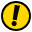
<style>
.page{position:relative;width:32px;height:32px;background:#ffd800}
.page>*{position:absolute;margin:0}
.t1{font:26px "HGPSoeiKakupoptai";color:#0a0a0a}
</style>
<div class="page">
<p class="t1" style="left:11px;top:5px;width:9px;height:21px">!</p>
</div>
